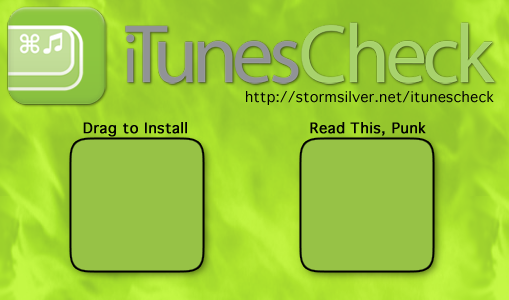
<style>
.page{position:relative;width:509px;height:300px;background:#97c246}
.page>*{position:absolute;margin:0}
.t1{font:14px "Geneva";letter-spacing:0.025em;color:#000000}
.t2{font:14px "Geneva";letter-spacing:0.025em;color:#000000;font-weight:bold}
</style>
<div class="page">
<p class="t1" style="left:246px;top:91px;width:248px;height:14px">http://stormsilver.net/itunescheck</p>
<p class="t2" style="left:83px;top:122px;width:104px;height:15px">Drag to Install</p>
<p class="t2" style="left:310px;top:122px;width:116px;height:14px">Read This, Punk</p>
</div>
